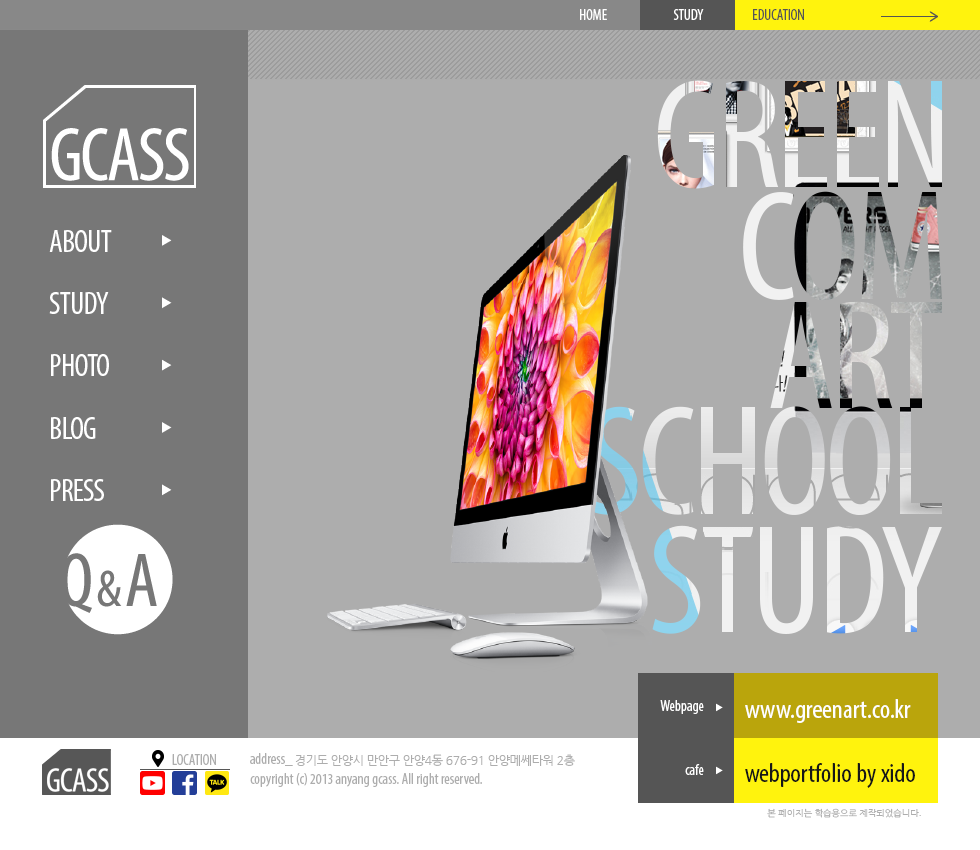
<style>
.page{position:relative;width:980px;height:850px;background:#adadad}
.page>*{position:absolute;margin:0}
.t1{font:15px "MyriadPro-Cond";color:#ffffff}
.t2{font:15px "MyriadPro-Cond";color:#555555}
.t3{font:31.5px "MyriadPro-Cond";letter-spacing:-0.03em;color:#ffffff}
.t4{font:27px "MyriadPro-Cond";color:#ffffff}
.t5{font:15px "MyriadPro-Cond";color:#adadad}
.t6{font:12px "NanumGothic";letter-spacing:-0.025em;color:#adadad}
.t7{font:27px "MyriadPro-Cond";color:#171717}
.t8{font:9px "NanumGothic";color:#adadad}
</style>
<div class="page">
<p class="t1" style="left:580px;top:9px;width:27px;height:11px">HOME</p>
<p class="t1" style="left:673px;top:9px;width:31px;height:11px">STUDY</p>
<p class="t2" style="left:753px;top:9px;width:51px;height:11px">EDUCATION</p>
<p class="t3" style="left:49px;top:230px;width:63px;height:22px">ABOUT</p>
<p class="t3" style="left:49px;top:292px;width:60px;height:22px">STUDY</p>
<p class="t3" style="left:51px;top:354px;width:58px;height:22px">PHOTO</p>
<p class="t3" style="left:51px;top:417px;width:45px;height:22px">BLOG</p>
<p class="t3" style="left:51px;top:479px;width:53px;height:22px">PRESS</p>
<p class="t1" style="left:660px;top:700px;width:44px;height:14px">Webpage</p>
<p class="t4" style="left:745px;top:699px;width:166px;height:24px">www.greenart.co.kr</p>
<p class="t5" style="left:172px;top:754px;width:44px;height:11px">LOCATION</p>
<p class="t6" style="left:250px;top:753px;width:325px;height:13px"><span class="t5">address_ </span>경기도 안양시 만안구 안양4동 676-91 안양메쎄타워 2층</p>
<p class="t5" style="left:250px;top:773px;width:232px;height:14px">copyright (c) 2013 anyang gcass. All right reserved.</p>
<p class="t1" style="left:685px;top:764px;width:19px;height:11px">cafe</p>
<p class="t7" style="left:745px;top:763px;width:170px;height:25px">webportfolio by xido</p>
<p class="t8" style="left:767px;top:808px;width:154px;height:10px">본 페이지는 학습용으로 제작되었습니다.</p>
</div>
